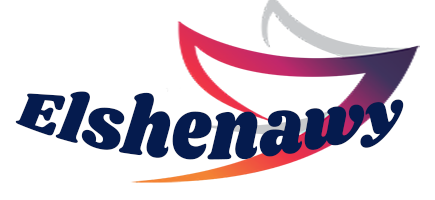
<style>
.page{position:relative;width:435px;height:200px;background:#ffffff}
.page>*{position:absolute;margin:0}
.t1{font:45.8px "Shrikhand-Regular";color:#051b4e;scale:1.45 1}
</style>
<div class="page">
<p class="t1" style="left:15px;top:91px;width:389px;height:69px">Elshenawy</p>
</div>
